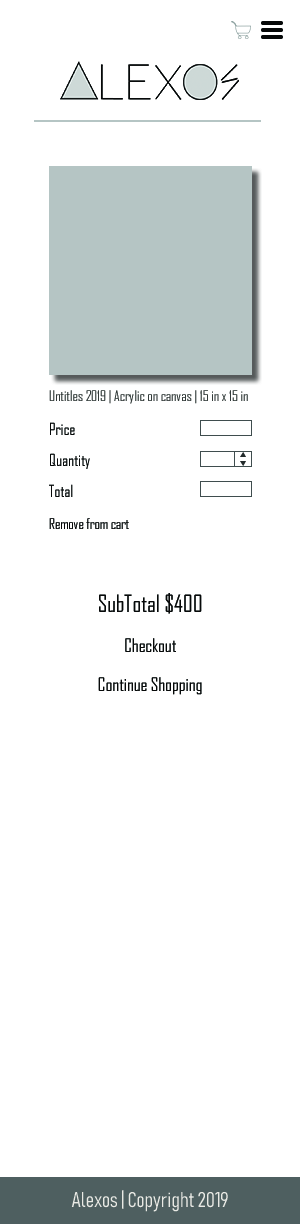
<style>
.page{position:relative;width:300px;height:1224px;background:#ffffff}
.page>*{position:absolute;margin:0}
.t1{font:14px "AgencyFB-Reg";color:#323938}
.t2{font:16px "AgencyFB-Reg";color:#070909}
.t3{font:14px "AgencyFB-Reg";color:#070909}
.t4{font:23.1px "AgencyFB-Reg";color:#070909}
.t5{font:18px "AgencyFB-Reg";color:#070909}
.t6{font:21.1px "Bahnschrift-LightCondensed";color:#e9e9e4}
</style>
<div class="page">
<p class="t1" style="left:49px;top:390px;width:199px;height:14px">Untitles 2019 | Acrylic on canvas | 15 in x 15 in</p>
<p class="t2" style="left:50px;top:422px;width:25px;height:13px">Price</p>
<p class="t2" style="left:50px;top:453px;width:40px;height:16px">Quantity</p>
<p class="t2" style="left:49px;top:484px;width:24px;height:13px">Total</p>
<p class="t3" style="left:49px;top:518px;width:80px;height:11px">Remove from cart</p>
<p class="t4" style="left:99px;top:593px;width:103px;height:21px">SubTotal $400</p>
<p class="t5" style="left:125px;top:638px;width:51px;height:14px">Checkout</p>
<p class="t5" style="left:98px;top:677px;width:104px;height:18px">Continue Shopping</p>
<p class="t6" style="left:71px;top:1190px;width:157px;height:22px">Alexos | Copyright 2019</p>
</div>
